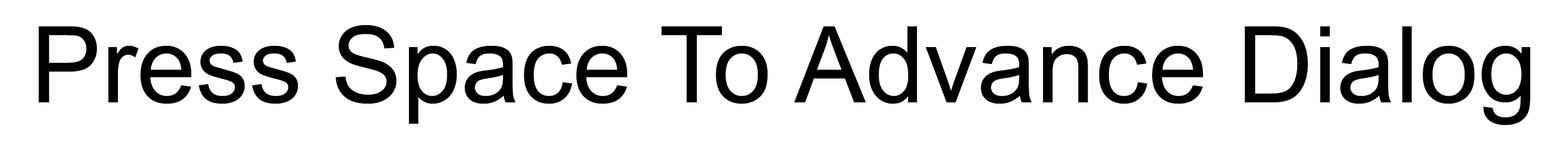
<style>
.page{position:relative;width:1568px;height:157px;background:#ffffff}
.page>*{position:absolute;margin:0}
.t1{font:106px "ArialMT";color:#000000}
</style>
<div class="page">
<p class="t1" style="left:38px;top:25px;width:1492px;height:100px">Press Space To Advance Dialog</p>
</div>
